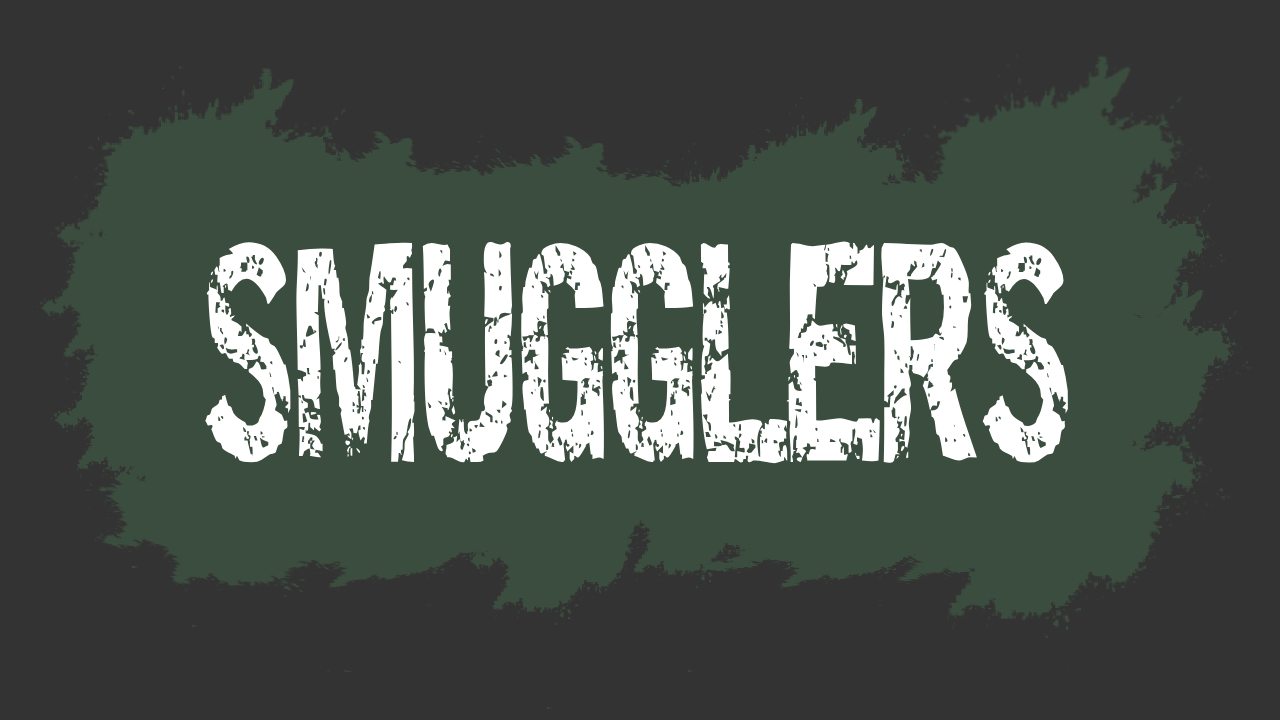
<style>
.page{position:relative;width:1280px;height:720px;background:#333333}
.page>*{position:absolute;margin:0}
.t1{font:219px "Destroy";color:#ffffff;scale:0.5 1}
</style>
<div class="page">
<p class="t1" style="left:205px;top:241px;width:863px;height:223px">SMUGGLERS</p>
</div>
